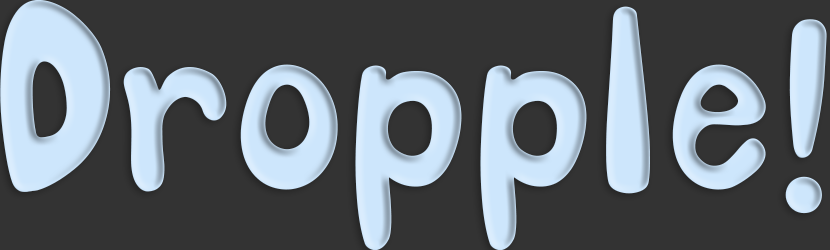
<style>
.page{position:relative;width:830px;height:250px;background:#333333}
.page>*{position:absolute;margin:0}
.t1{font:197px "SORRY_SORRY";letter-spacing:0.03em;color:#cde6fc}
</style>
<div class="page">
<p class="t1" style="left:0px;top:0px;width:827px;height:251px">Dropple!</p>
</div>
